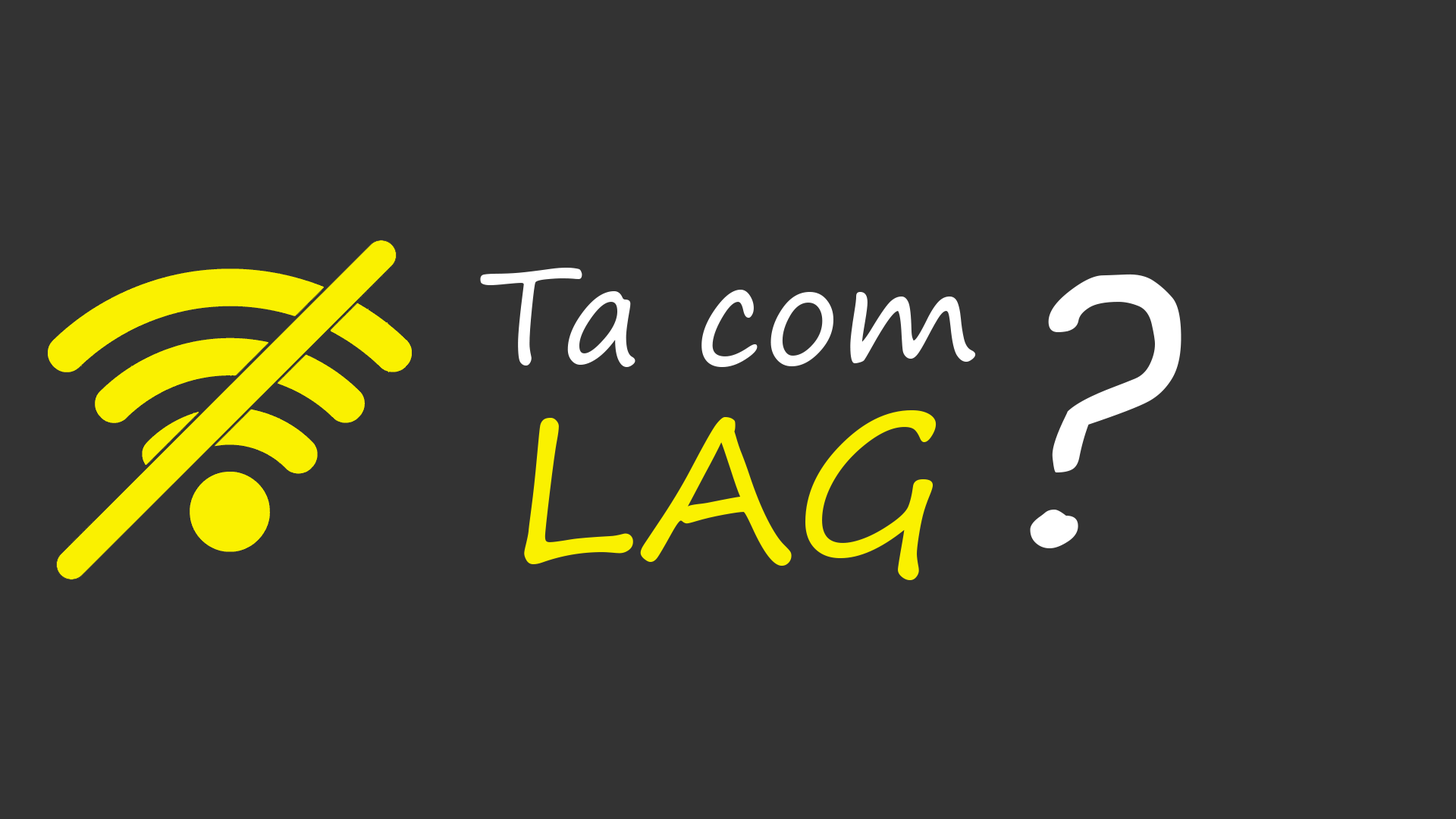
<style>
.page{position:relative;width:1456px;height:819px;background:#333333}
.page>*{position:absolute;margin:0}
.t1{font:135.8px "SegoePrint";color:#ffffff}
.t2{font:357.2px "SegoePrint";color:#ffffff}
.t3{font:197.5px "SegoePrint";color:#faf100}
</style>
<div class="page">
<p class="t1" style="left:480px;top:268px;width:496px;height:99px">Ta com</p>
<p class="t2" style="left:1030px;top:274px;width:151px;height:274px">?</p>
<p class="t3" style="left:524px;top:410px;width:413px;height:170px">LAG</p>
</div>
